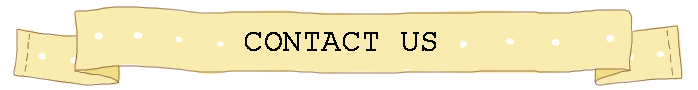
<style>
.page{position:relative;width:698px;height:90px;background:#faebb0}
.page>*{position:absolute;margin:0}
.t1{font:31.4px "CourierNewPSMT";color:#000000;font-weight:bold}
</style>
<div class="page">
<p class="t1" style="left:245px;top:32px;width:191px;height:19px">CONTACT US</p>
</div>
